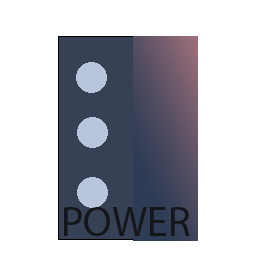
<style>
.page{position:relative;width:256px;height:256px;background:#ffffff}
.page>*{position:absolute;margin:0}
.t1{font:41.7px "MyriadPro-Regular";color:#14161a}
</style>
<div class="page">
<p class="t1" style="left:64px;top:207px;width:126px;height:29px">POWER</p>
</div>
